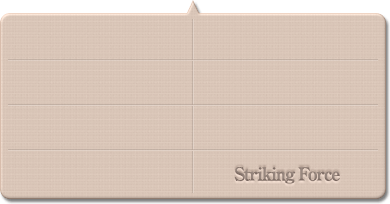
<style>
.page{position:relative;width:390px;height:204px}
.page>*{position:absolute;margin:0}
.t1{font:18px "RyuminPro-ExBold";letter-spacing:-0.08em;color:#9c8c83}
</style>
<div class="page">
<p class="t1" style="left:234px;top:167px;width:106px;height:17px">Striking Force</p>
</div>
